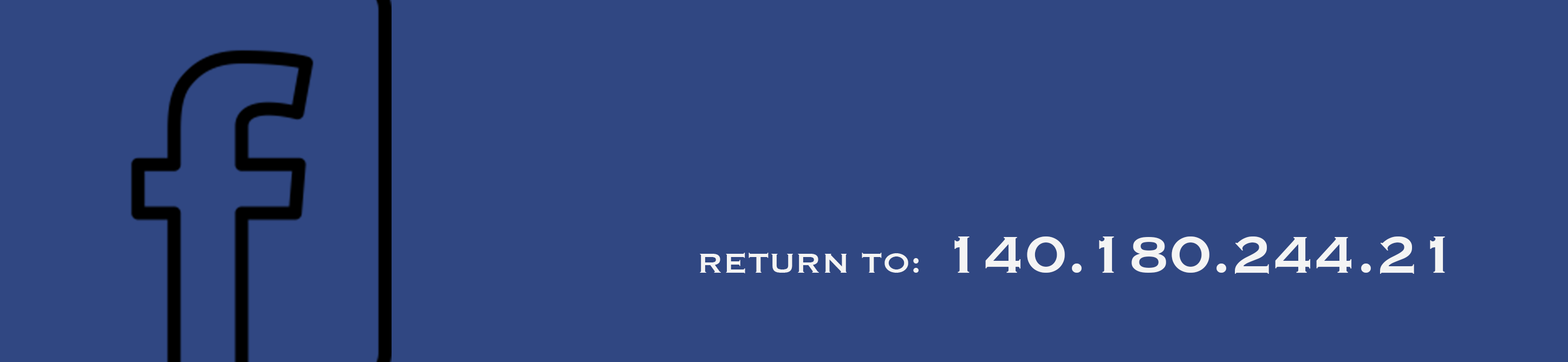
<style>
.page{position:relative;width:1568px;height:362px;background:#304782}
.page>*{position:absolute;margin:0}
.t1{font:67.7px "Copperplate";color:#f4f4f4}
.t2{font:36.1px "Copperplate";color:#f4f4f4}
</style>
<div class="page">
<p class="t1" style="left:700px;top:237px;width:745px;height:37px"><span class="t2">RETURN TO:</span> 140.180.244.21</p>
</div>
